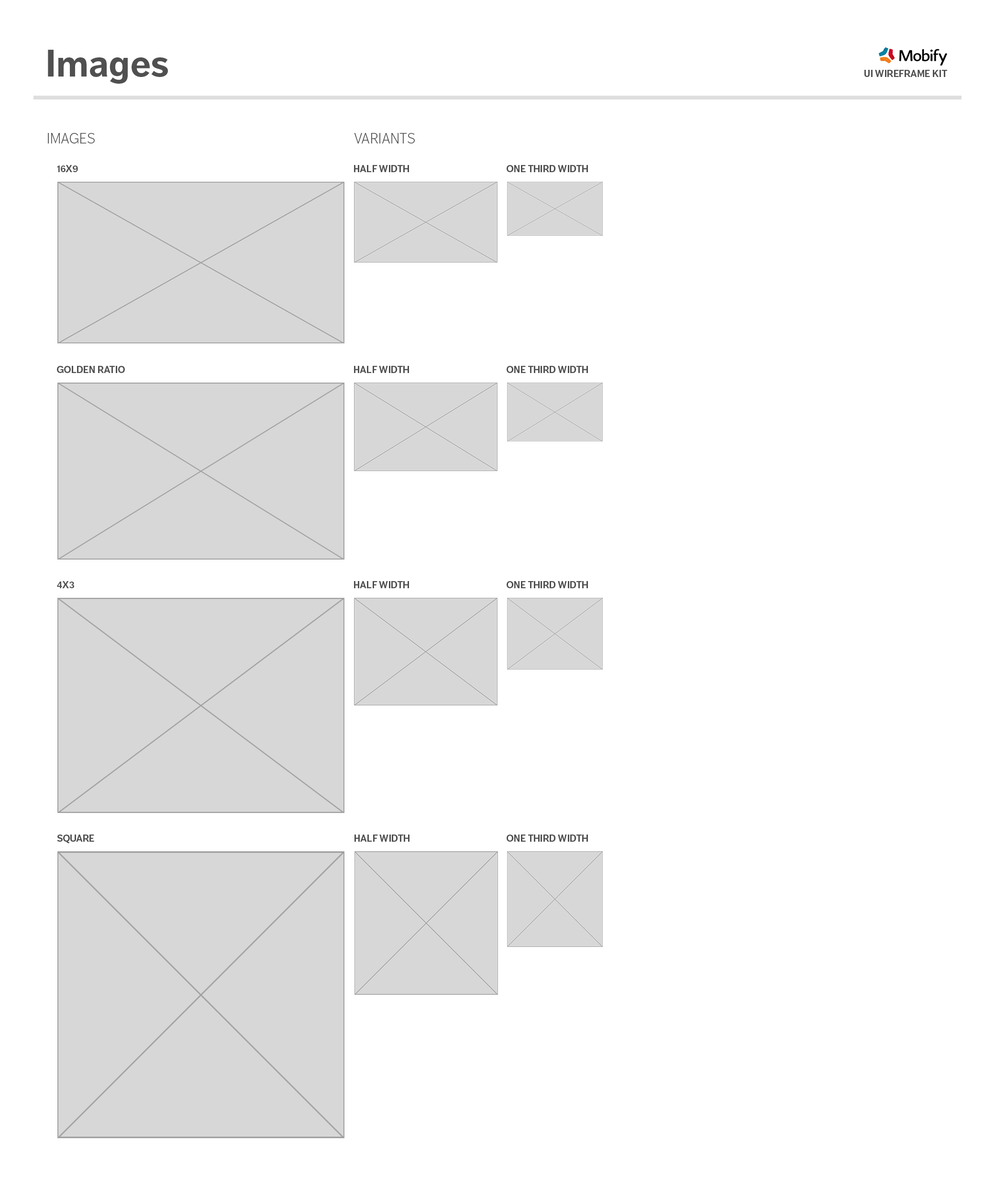
<style>
.page{position:relative;width:995px;height:1198px;background:#ffffff}
.page>*{position:absolute;margin:0}
.t1{font:38.3px "DagnyOT-Bold";color:#505050}
.t2{font:9.6px "DagnyOT-Bold";color:#505050;text-transform:uppercase}
.t3{font:14.4px "DagnyOT-Light";color:#505050;text-transform:uppercase}
</style>
<div class="page">
<p class="t1" style="left:48px;top:50px;width:120px;height:34px">Images</p>
<p class="t2" style="left:864px;top:70px;width:83px;height:7px">UI Wireframe Kit</p>
<p class="t3" style="left:48px;top:133px;width:47px;height:11px">Images</p>
<p class="t3" style="left:354px;top:133px;width:61px;height:11px">Variants</p>
<p class="t2" style="left:57px;top:165px;width:21px;height:7px">16x9</p>
<p class="t2" style="left:354px;top:165px;width:55px;height:7px">Half Width</p>
<p class="t2" style="left:507px;top:165px;width:81px;height:7px">One Third Width</p>
<p class="t2" style="left:57px;top:366px;width:68px;height:7px">Golden Ratio</p>
<p class="t2" style="left:354px;top:366px;width:55px;height:7px">Half Width</p>
<p class="t2" style="left:507px;top:366px;width:81px;height:7px">One Third Width</p>
<p class="t2" style="left:57px;top:581px;width:17px;height:7px">4x3</p>
<p class="t2" style="left:354px;top:581px;width:55px;height:7px">Half Width</p>
<p class="t2" style="left:507px;top:581px;width:81px;height:7px">One Third Width</p>
<p class="t2" style="left:57px;top:835px;width:37px;height:9px">square</p>
<p class="t2" style="left:354px;top:835px;width:56px;height:7px">Half Width</p>
<p class="t2" style="left:507px;top:835px;width:81px;height:7px">One Third Width</p>
</div>
